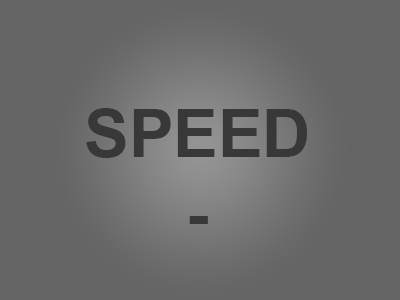
<style>
.page{position:relative;width:400px;height:300px;background:#646464}
.page>*{position:absolute;margin:0}
.t1{font:66.7px "Arial-BoldMT";color:#383838}
</style>
<div class="page">
<p class="t1" style="left:86px;top:108px;width:221px;height:116px;text-align:center">SPEED<br>-</p>
</div>
